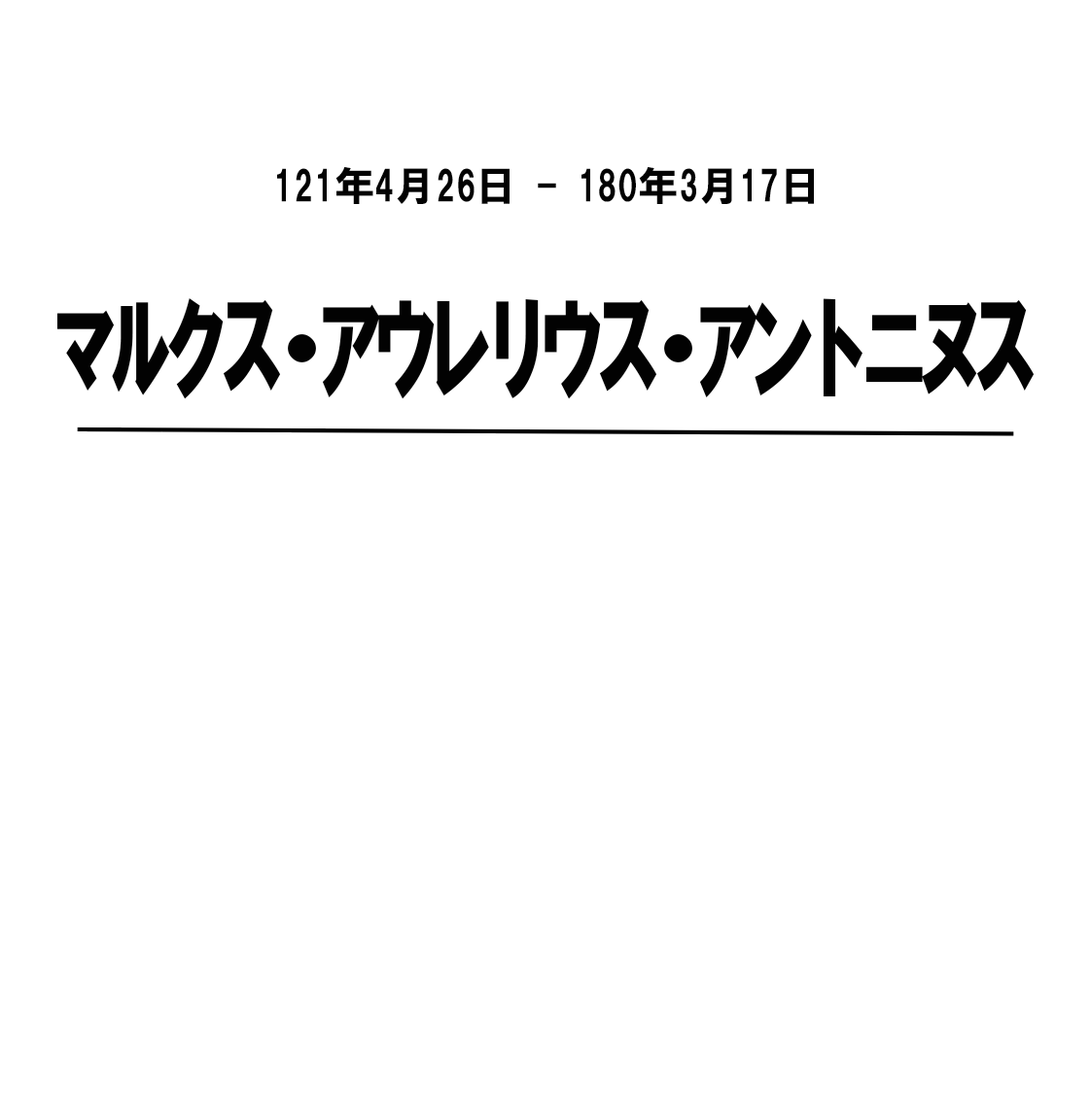
<style>
.page{position:relative;width:1091px;height:1093px;background:#ffffff}
.page>*{position:absolute;margin:0}
.t1{font:40.5px "HGSoeiKakugothicUB";color:#020202}
.t2{font:115.4px "HGSoeiKakugothicUB";letter-spacing:-0.02em;color:#020202}
</style>
<div class="page">
<p class="t1" style="left:277px;top:167px;width:537px;height:37px">121年4月26日 - 180年3月17日</p>
<p class="t2" style="left:56px;top:298px;width:978px;height:101px">ﾏﾙｸｽ・ｱｳﾚﾘｳｽ・ｱﾝﾄﾆﾇｽ</p>
</div>
